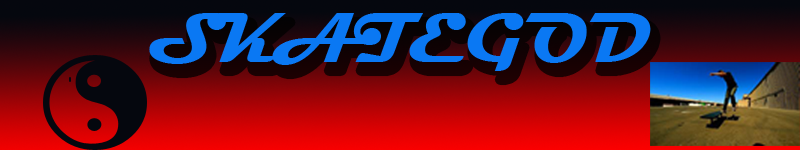
<style>
.page{position:relative;width:800px;height:150px}
.page>*{position:absolute;margin:0}
.t1{font:72px "Magneto-Bold";color:#0a78f3}
</style>
<div class="page">
<p class="t1" style="left:149px;top:13px;width:502px;height:58px">SKATEGOD</p>
</div>
